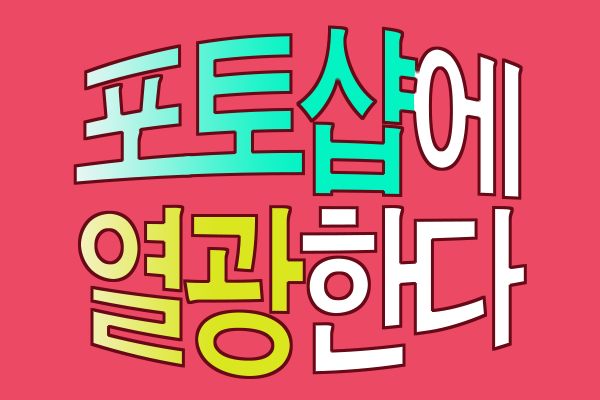
<style>
.page{position:relative;width:600px;height:400px;background:#ec4964}
.page>*{position:absolute;margin:0}
.t1{font:140.3px/140px "AdobeGothicStd-Bold";letter-spacing:-0.12em;scale:0.9 1}
</style>
<div class="page">
<p class="t1" style="left:74px;top:26px;width:452px;height:352px;text-align:center">포토샵에<br>열광한다</p>
</div>
